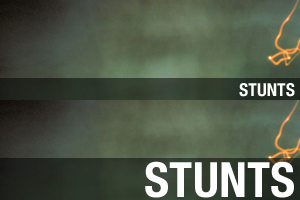
<style>
.page{position:relative;width:300px;height:200px}
.page>*{position:absolute;margin:0}
.t1{font:18px "HelveticaNeue-CondensedBold";color:#ffffff;text-transform:uppercase}
.t2{font:48.5px "HelveticaNeue-CondensedBold";color:#ffffff;text-transform:uppercase}
</style>
<div class="page">
<p class="t1" style="left:239px;top:83px;width:56px;height:14px">STUNTS</p>
<p class="t2" style="left:145px;top:161px;width:149px;height:37px">STUNTS</p>
</div>
